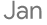
<style>
.page{position:relative;width:47px;height:25px;background:#ffffff}
.page>*{position:absolute;margin:0}
.t1{font:24.9px "GoogleSansDisplay-Regular";color:#757575}
</style>
<div class="page">
<p class="t1" style="left:3px;top:0px;width:39px;height:20px">Jan</p>
</div>
